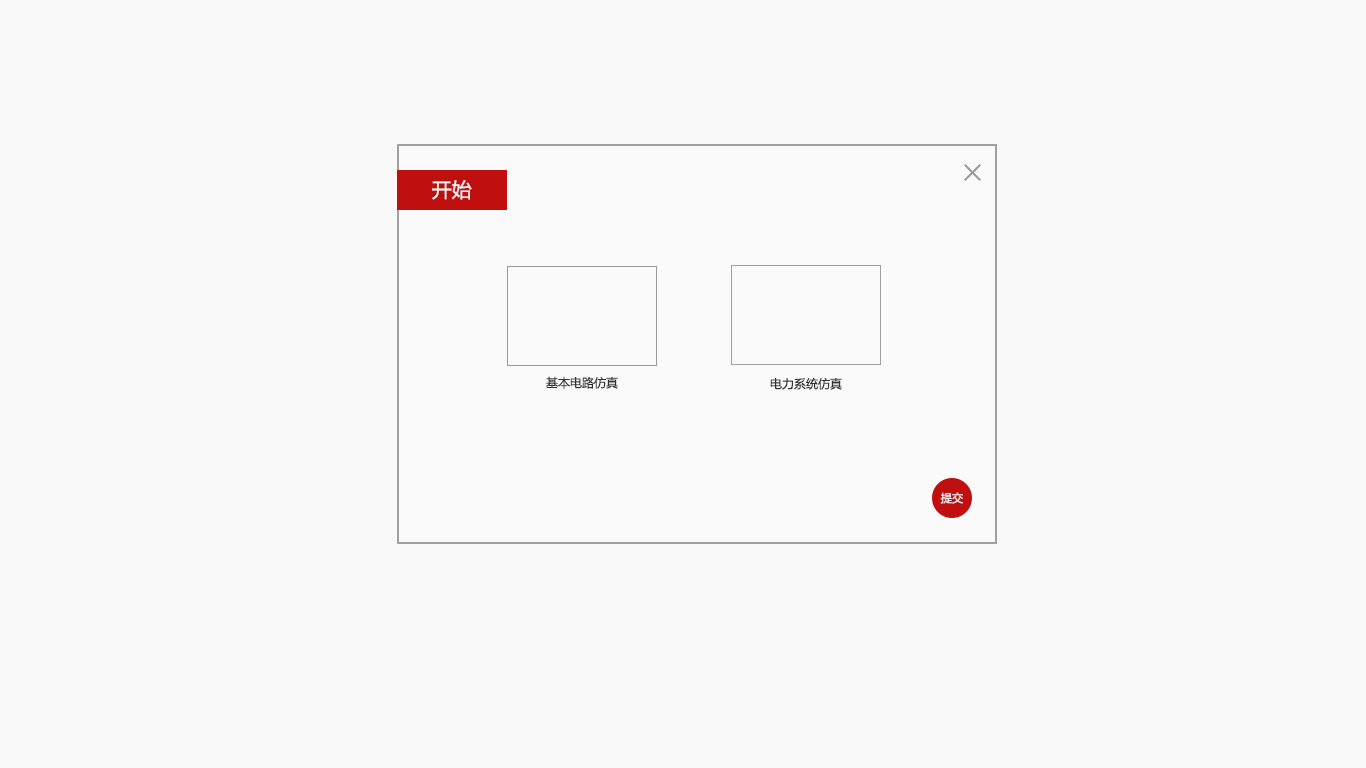
<style>
.page{position:relative;width:1366px;height:768px;background:#f9f9f9}
.page>*{position:absolute;margin:0}
.t1{font:20px "MicrosoftYaHei";color:#f3f3f3}
.t2{font:12px "MicrosoftYaHei";color:#313131}
.t3{font:11.2px "MicrosoftYaHei";color:#f3f3f3}
</style>
<div class="page">
<p class="t1" style="left:432px;top:180px;width:40px;height:20px">开始</p>
<p class="t2" style="left:546px;top:376px;width:72px;height:13px">基本电路仿真</p>
<p class="t2" style="left:770px;top:377px;width:72px;height:13px">电力系统仿真</p>
<p class="t3" style="left:940px;top:492px;width:23px;height:12px">提交</p>
</div>
